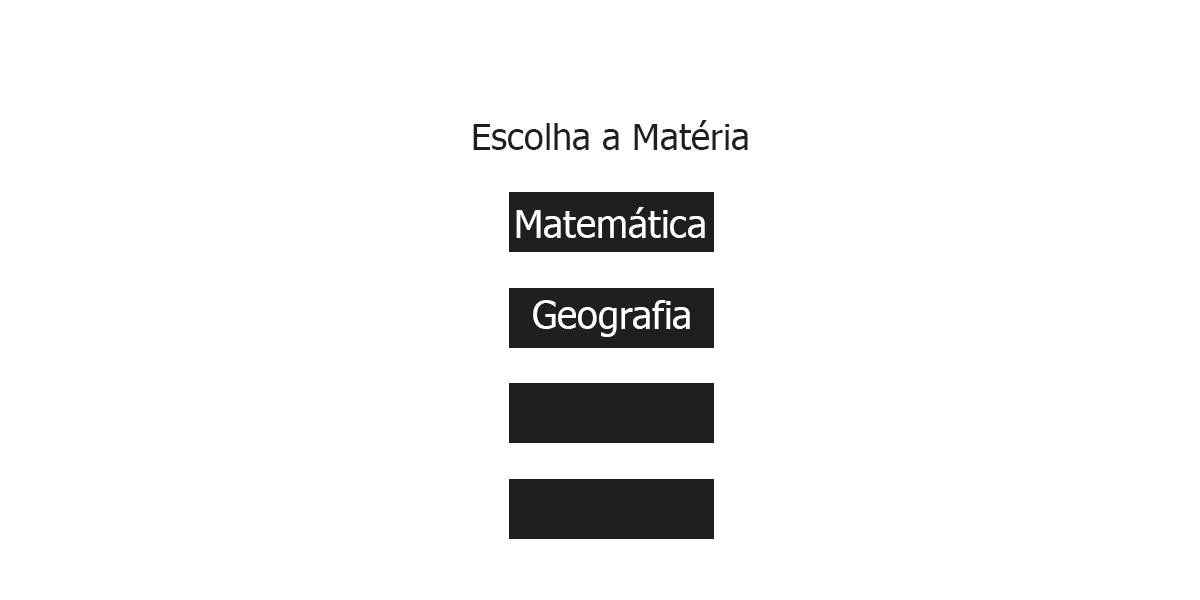
<style>
.page{position:relative;width:1200px;height:600px;background:#ffffff}
.page>*{position:absolute;margin:0}
.t1{font:36px "Tahoma";color:#201f1f}
.t2{font:38px "Tahoma";color:#ffffff}
</style>
<div class="page">
<p class="t1" style="left:473px;top:120px;width:275px;height:30px">Escolha a Matéria</p>
<p class="t2" style="left:516px;top:207px;width:189px;height:31px">Matemática</p>
<p class="t2" style="left:533px;top:300px;width:157px;height:37px">Geografia</p>
</div>
